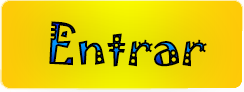
<style>
.page{position:relative;width:244px;height:92px}
.page>*{position:absolute;margin:0}
.t1{font:50px "Jokerman-Regular"}
</style>
<div class="page">
<p class="t1" style="left:49px;top:21px;width:158px;height:46px">Entrar</p>
</div>
